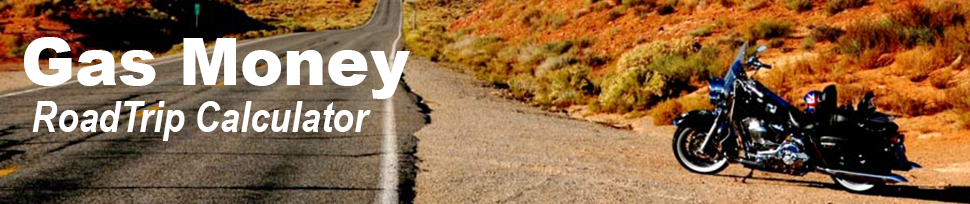
<style>
.page{position:relative;width:970px;height:204px}
.page>*{position:absolute;margin:0}
.t1{font:64.6px "Arial-Black";color:#ffffff}
.t2{font:43.2px "ArialNarrow-BoldItalic";color:#ffffff}
</style>
<div class="page">
<p class="t1" style="left:24px;top:37px;width:386px;height:62px">Gas Money</p>
<p class="t2" style="left:32px;top:101px;width:339px;height:40px">RoadTrip Calculator</p>
</div>
